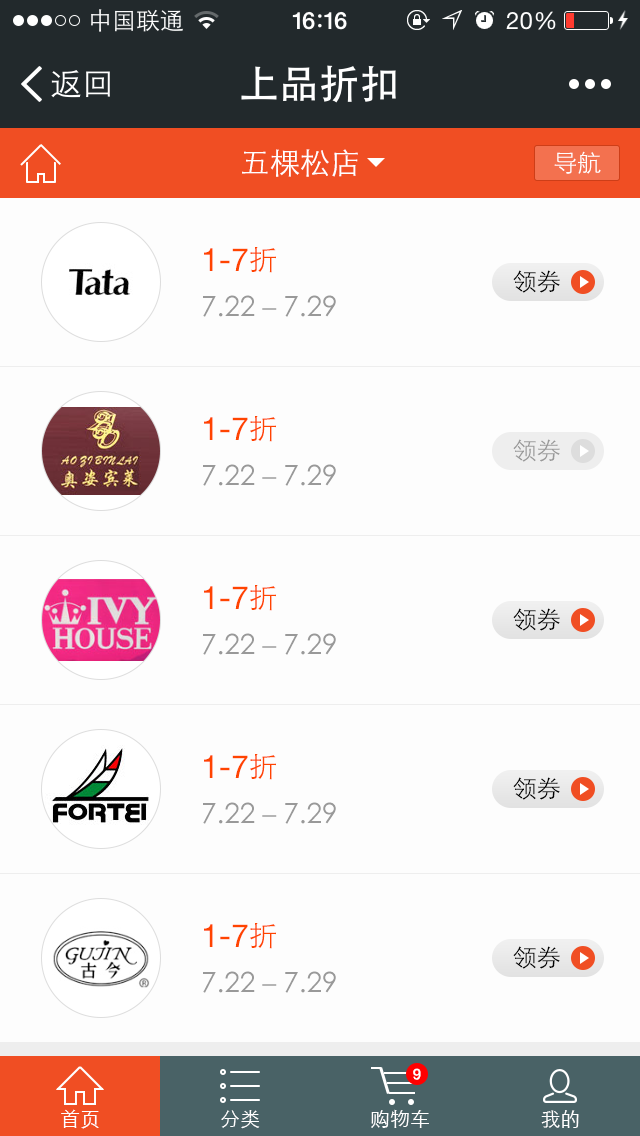
<style>
.page{position:relative;width:640px;height:1136px;background:#fdfdfd}
.page>*{position:absolute;margin:0}
.t1{font:30px "STXihei";color:#ffffff}
.t2{font:24px "STXihei";color:#ffffff}
.t3{font:28px/48px "STXihei";color:#999999}
.t4{font:32px/48px "HelveticaNeueLTPro-Roman";color:#ff4400}
.t5{font:28px/48px "STXihei";color:#ff4400}
.t6{font:24px "STXihei";color:#000000}
.t7{font:24px "STXihei";color:#999999}
.t8{font:15px "Helvetica";color:#ffffff}
.t9{font:20px "STXihei";color:#ffffff}
</style>
<div class="page">
<p class="t1" style="left:242px;top:149px;width:116px;height:28px">五棵松店</p>
<p class="t2" style="left:554px;top:151px;width:47px;height:23px">导航</p>
<p class="t3" style="left:203px;top:247px;width:133px;height:70px"><span class="t4">1-7</span><span class="t5">折<br></span>7.22－7.29</p>
<p class="t6" style="left:513px;top:270px;width:47px;height:23px">领券</p>
<p class="t3" style="left:203px;top:416px;width:133px;height:70px"><span class="t4">1-7</span><span class="t5">折<br></span>7.22－7.29</p>
<p class="t7" style="left:513px;top:439px;width:47px;height:23px">领券</p>
<p class="t3" style="left:203px;top:585px;width:133px;height:70px"><span class="t4">1-7</span><span class="t5">折<br></span>7.22－7.29</p>
<p class="t6" style="left:513px;top:608px;width:47px;height:23px">领券</p>
<p class="t3" style="left:203px;top:754px;width:133px;height:70px"><span class="t4">1-7</span><span class="t5">折<br></span>7.22－7.29</p>
<p class="t6" style="left:513px;top:777px;width:47px;height:23px">领券</p>
<p class="t3" style="left:203px;top:923px;width:133px;height:70px"><span class="t4">1-7</span><span class="t5">折<br></span>7.22－7.29</p>
<p class="t6" style="left:513px;top:946px;width:47px;height:23px">领券</p>
<p class="t8" style="left:413px;top:1068px;width:8px;height:12px">9</p>
<p class="t9" style="left:61px;top:1109px;width:38px;height:20px">首页</p>
<p class="t9" style="left:221px;top:1110px;width:39px;height:19px">分类</p>
<p class="t9" style="left:371px;top:1109px;width:58px;height:19px">购物车</p>
<p class="t9" style="left:541px;top:1110px;width:38px;height:18px">我的</p>
</div>
